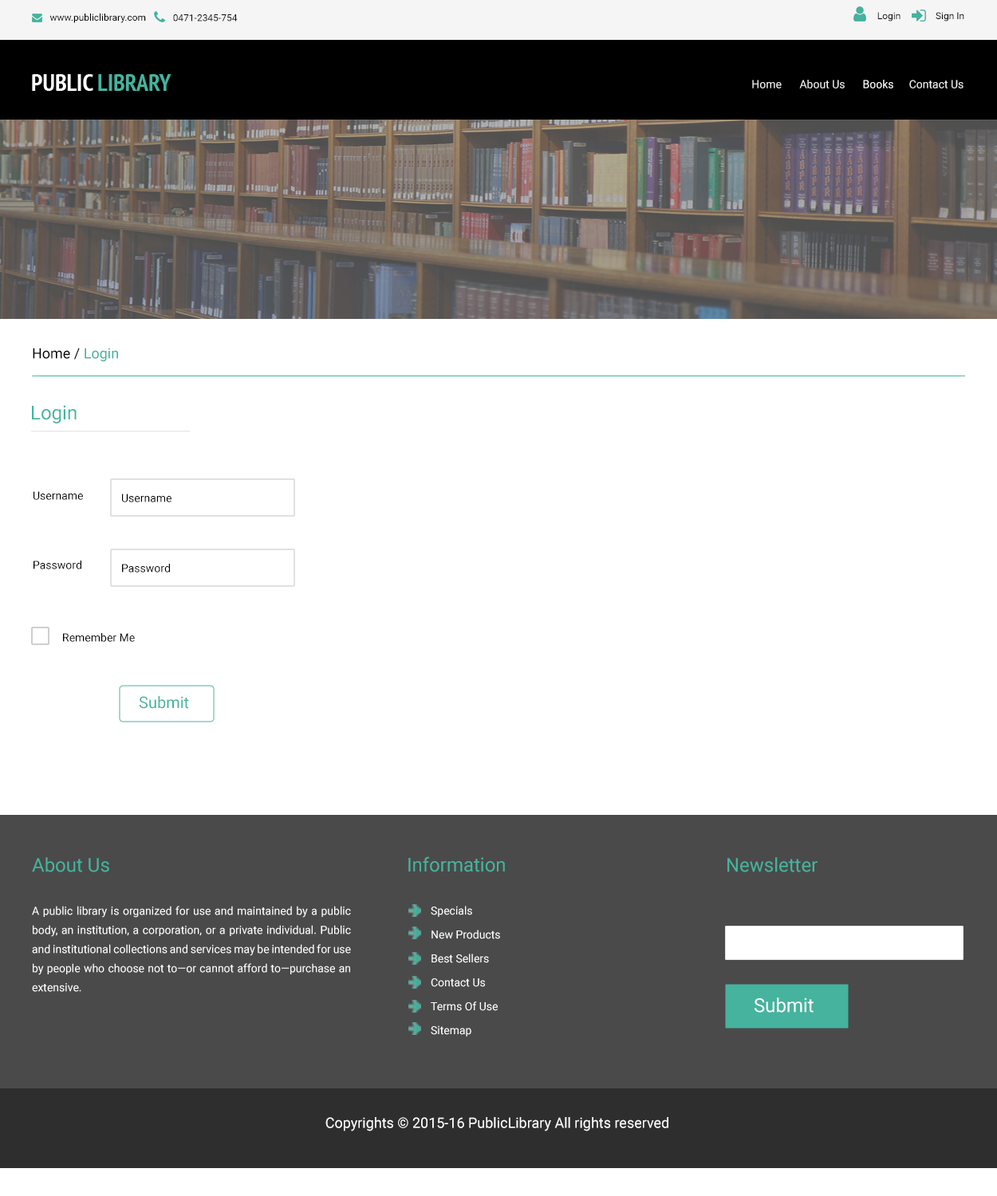
<style>
.page{position:relative;width:997px;height:1196px;background:#ffffff}
.page>*{position:absolute;margin:0}
.t1{font:9.6px "Roboto-Regular";color:#000000}
.t2{font:11.2px "Roboto-Regular";color:#f2f2f2}
.t3{font:11.2px "Roboto-Regular";color:#eeeeee}
.t4{font:11.2px "Roboto-Regular";color:#fefefe}
.t5{font:11.2px "Roboto-Regular";color:#f1f1f1}
.t6{font:14.4px "Roboto-Regular";color:#000000}
.t7{font:14.4px "Roboto-Regular";color:#45b39e}
.t8{font:19.1px "Roboto-Regular";color:#45b39e}
.t9{font:11.2px "Roboto-Regular";color:#000000}
.t10{font:15.9px "Roboto-Regular";color:#45b39e}
.t11{font:11.2px/23.9px "Roboto-Regular";color:#ffffff}
.t12{font:19.1px/19.1px "Roboto-Regular";color:#45b39e}
.t13{font:11.2px/19.1px "Roboto-Regular";color:#ffffff}
.t14{font:19.1px "Roboto-Regular";color:#ffffff}
.t15{font:14.4px "Roboto-Regular";color:#ffffff}
</style>
<div class="page">
<p class="t1" style="left:49px;top:13px;width:97px;height:10px">www.publiclibrary.com</p>
<p class="t1" style="left:173px;top:14px;width:65px;height:8px">0471-2345-754</p>
<p class="t1" style="left:877px;top:12px;width:23px;height:10px">Login</p>
<p class="t1" style="left:935px;top:12px;width:29px;height:10px">Sign In</p>
<p class="t2" style="left:752px;top:80px;width:30px;height:9px">Home</p>
<p class="t3" style="left:799px;top:80px;width:46px;height:9px">About Us</p>
<p class="t4" style="left:863px;top:80px;width:30px;height:9px">Books</p>
<p class="t5" style="left:909px;top:80px;width:54px;height:9px">Contact Us</p>
<p class="t6" style="left:33px;top:348px;width:85px;height:14px">Home / <span class="t7">Login</span></p>
<p class="t8" style="left:32px;top:405px;width:45px;height:18px">Login</p>
<p class="t9" style="left:33px;top:491px;width:50px;height:9px">Username</p>
<p class="t9" style="left:122px;top:494px;width:49px;height:8px">Username</p>
<p class="t9" style="left:33px;top:561px;width:48px;height:8px">Password</p>
<p class="t9" style="left:122px;top:564px;width:48px;height:9px">Password</p>
<p class="t9" style="left:63px;top:633px;width:72px;height:9px">Remember Me</p>
<p class="t10" style="left:139px;top:696px;width:50px;height:13px">Submit</p>
<p class="t8" style="left:32px;top:857px;width:77px;height:15px">About Us</p>
<p class="t11" style="left:408px;top:856px;width:97px;height:181px;text-align:justify"><span class="t12">Information<br><br></span>Specials<br>New Products<br>Best Sellers<br>Contact Us<br>Terms Of Use<br>Sitemap</p>
<p class="t8" style="left:727px;top:857px;width:90px;height:15px">Newsletter</p>
<p class="t13" style="left:32px;top:906px;width:319px;height:86px;text-align:justify">A public library is organized for use and maintained by a public body, an institution, a corporation, or a private individual. Public and institutional collections and services may be intended for use by people who choose not to—or cannot afford to—purchase an extensive.</p>
<p class="t14" style="left:754px;top:998px;width:59px;height:15px">Submit</p>
<p class="t15" style="left:325px;top:1117px;width:343px;height:15px">Copyrights © 2015-16 PublicLibrary All rights reserved</p>
</div>
